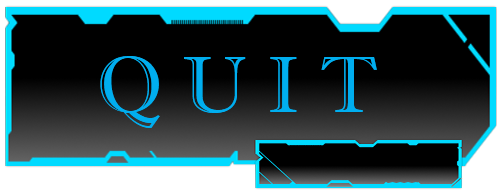
<style>
.page{position:relative;width:500px;height:193px;background:#000000}
.page>*{position:absolute;margin:0}
.t1{font:80px "ImprintMT-Shadow";color:#00aeef}
</style>
<div class="page">
<p class="t1" style="left:100px;top:56px;width:277px;height:72px">Q U I T</p>
</div>
